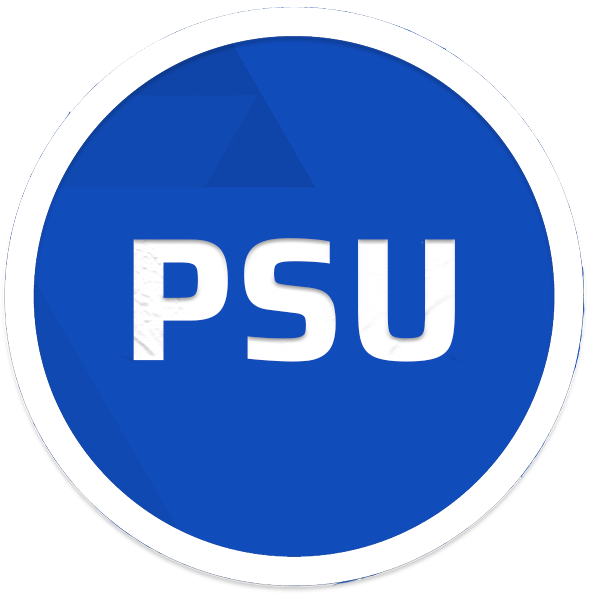
<style>
.page{position:relative;width:600px;height:600px;background:#114cbb}
.page>*{position:absolute;margin:0}
.t1{font:175px "SairaRoman_686.000wght";letter-spacing:0.01em;color:#ffffff}
</style>
<div class="page">
<p class="t1" style="left:133px;top:238px;width:322px;height:124px">PSU</p>
</div>
